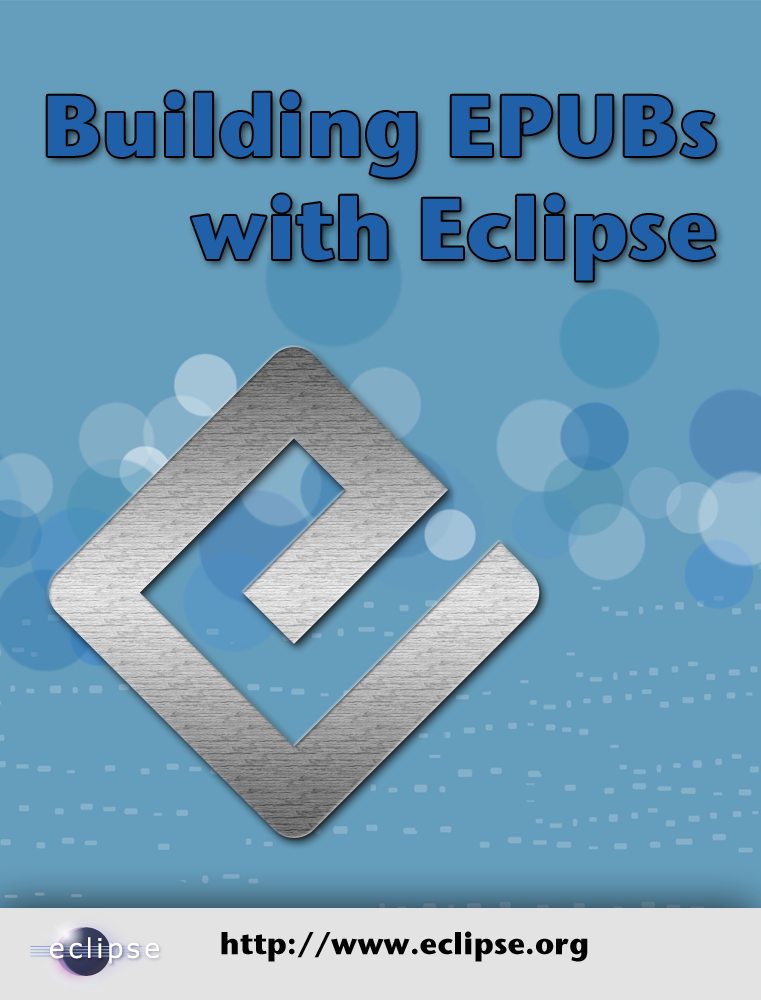
<style>
.page{position:relative;width:761px;height:1000px;background:#659ebc}
.page>*{position:absolute;margin:0}
.t1{font:86px "StoneSansITC-Bold";color:#1f60a9}
.t2{font:30px "StoneSansITC-Bold";color:#000000}
</style>
<div class="page">
<p class="t1" style="left:47px;top:91px;width:669px;height:190px;text-align:right">Building EPUBs<br>with Eclipse</p>
<p class="t2" style="left:221px;top:931px;width:367px;height:31px">http://www.eclipse.org</p>
</div>
